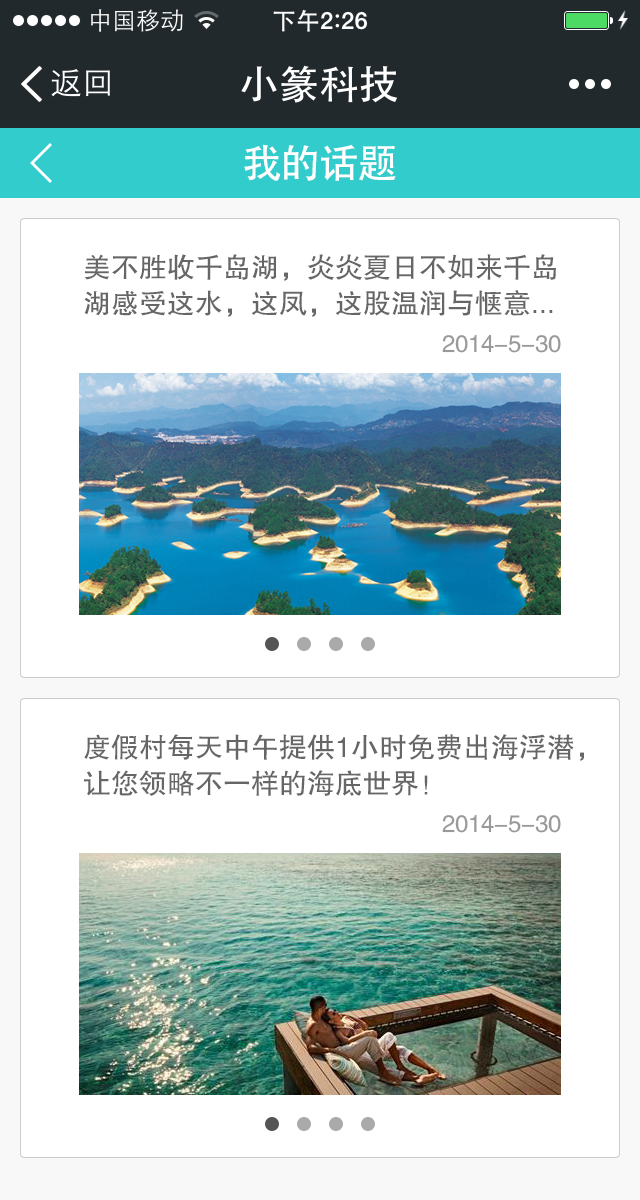
<style>
.page{position:relative;width:640px;height:1200px;background:#ffffff}
.page>*{position:absolute;margin:0}
.t1{font:40px "AdobeHeitiStd-Regular";color:#ffffff}
.t2{font:28px/36px "FZHTJW--GB1-0";color:#666666}
.t3{font:24px "FZHTJW--GB1-0";color:#999999}
</style>
<div class="page">
<p class="t1" style="left:244px;top:144px;width:152px;height:37px">我的话题</p>
<p class="t2" style="left:84px;top:254px;width:472px;height:63px">美不胜收千岛湖，炎炎夏日不如来千岛<br>湖感受这水，这凤，这股温润与惬意...</p>
<p class="t3" style="left:442px;top:334px;width:119px;height:19px">2014-5-30</p>
<p class="t2" style="left:84px;top:734px;width:500px;height:62px">度假村每天中午提供1小时免费出海浮潜，<br>让您领略不一样的海底世界！</p>
<p class="t3" style="left:442px;top:814px;width:119px;height:19px">2014-5-30</p>
</div>
